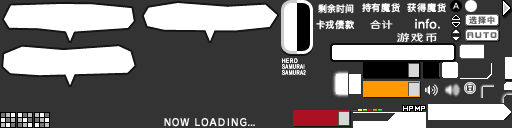
<style>
.page{position:relative;width:512px;height:128px;background:#333333}
.page>*{position:absolute;margin:0}
.t1{font:9.3px "DFKingGothicSC14-Semibold";letter-spacing:0.045em;color:#ffffff;scale:0.95 1}
.t2{font:9.3px "DFKingGothicSC14-Semibold";letter-spacing:0.045em;color:#ffffff}
.t3{font:8px "DFKingGothicSC14-Semibold";letter-spacing:0.125em;color:#666666}
.t4{font:9.6px "HYWenHei-FEW";letter-spacing:0.045em;color:#ffffff;scale:1.17 1}
.t5{font:10.1px "HYWenHei-FEW";letter-spacing:0.105em;color:#ffffff;scale:1.26 1}
.t6{font:9.3px "DFPZongYiW7";letter-spacing:0.125em;color:#666666}
</style>
<div class="page">
<p class="t1" style="left:318px;top:4px;width:36px;height:10px">剩余时间</p>
<p class="t2" style="left:362px;top:3px;width:38px;height:10px">持有魔货</p>
<p class="t2" style="left:407px;top:3px;width:39px;height:10px">获得魔货</p>
<p class="t3" style="left:469px;top:16px;width:26px;height:8px">选择中</p>
<p class="t2" style="left:316px;top:20px;width:39px;height:10px">卡戎债款</p>
<p class="t4" style="left:370px;top:20px;width:23px;height:10px">合计</p>
<p class="t5" style="left:397px;top:32px;width:40px;height:11px">游戏币</p>
<p class="t6" style="left:467px;top:32px;width:30px;height:7px">AUTO</p>
</div>
